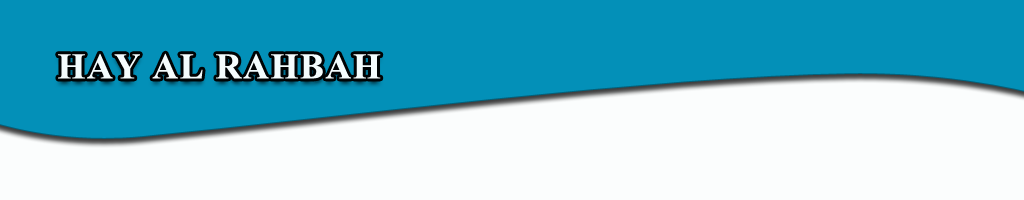
<style>
.page{position:relative;width:1024px;height:200px;background:#0390b8}
.page>*{position:absolute;margin:0}
.t1{font:36px "TimesNewRomanPS-BoldMT";letter-spacing:0.04em;color:#fafcfc}
</style>
<div class="page">
<p class="t1" style="left:58px;top:53px;width:323px;height:26px">HAY AL RAHBAH</p>
</div>
